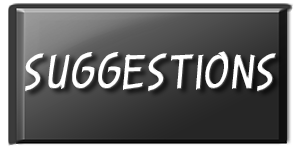
<style>
.page{position:relative;width:300px;height:150px}
.page>*{position:absolute;margin:0}
.t1{font:50px "KarmaticRevolution";color:#ffffff}
</style>
<div class="page">
<p class="t1" style="left:25px;top:51px;width:251px;height:41px">suggestions</p>
</div>
